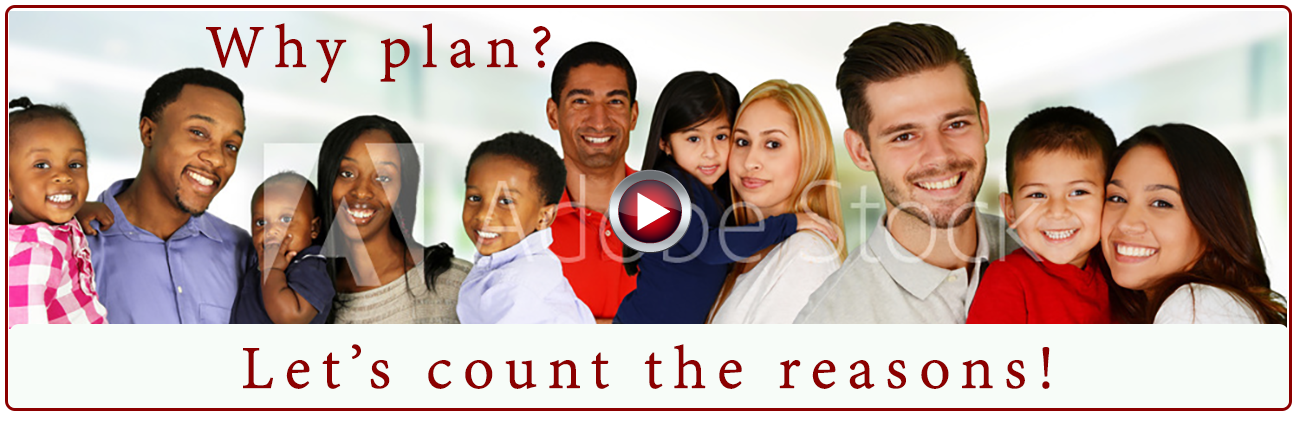
<style>
.page{position:relative;width:1300px;height:423px}
.page>*{position:absolute;margin:0}
.t1{font:65.9px "AdobeDevanagari-Regular";letter-spacing:0.15em;color:#8b0000;font-weight:bold}
</style>
<div class="page">
<p class="t1" style="left:206px;top:23px;width:345px;height:60px">Why plan?</p>
<p class="t1" style="left:243px;top:344px;width:807px;height:45px">Let’s count the reasons!</p>
</div>
